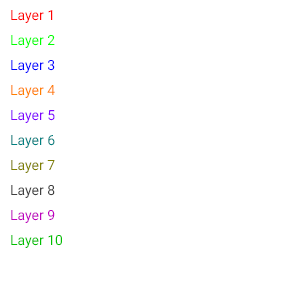
<style>
.page{position:relative;width:300px;height:300px;background:#ffffff}
.page>*{position:absolute;margin:0}
.t1{font:14px "Roboto-Regular";color:#ff0000}
.t2{font:14px "Roboto-Regular";color:#00ff00}
.t3{font:14px "Roboto-Regular";color:#0000ff}
.t4{font:14px "Roboto-Regular";color:#ff8000}
.t5{font:14px "Roboto-Regular";color:#8000ff}
.t6{font:14px "Roboto-Regular";color:#008080}
.t7{font:14px "Roboto-Regular";color:#808000}
.t8{font:14px "Roboto-Regular";color:#404040}
.t9{font:14px "Roboto-Regular";color:#c000c0}
.t10{font:14px "Roboto-Regular";color:#00c000}
</style>
<div class="page">
<p class="t1" style="left:11px;top:10px;width:42px;height:13px">Layer 1</p>
<p class="t2" style="left:11px;top:35px;width:44px;height:13px">Layer 2</p>
<p class="t3" style="left:11px;top:60px;width:44px;height:13px">Layer 3</p>
<p class="t4" style="left:11px;top:85px;width:44px;height:13px">Layer 4</p>
<p class="t5" style="left:11px;top:110px;width:44px;height:13px">Layer 5</p>
<p class="t6" style="left:11px;top:135px;width:44px;height:13px">Layer 6</p>
<p class="t7" style="left:11px;top:160px;width:44px;height:13px">Layer 7</p>
<p class="t8" style="left:11px;top:185px;width:44px;height:13px">Layer 8</p>
<p class="t9" style="left:11px;top:210px;width:44px;height:13px">Layer 9</p>
<p class="t10" style="left:11px;top:235px;width:51px;height:13px">Layer 10</p>
</div>
